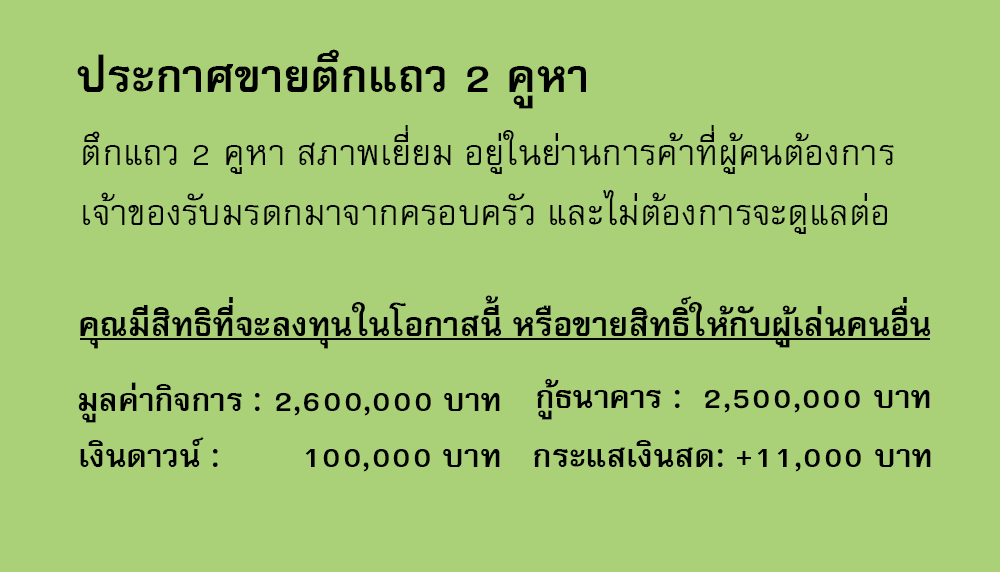
<style>
.page{position:relative;width:1000px;height:572px;background:#aad178}
.page>*{position:absolute;margin:0}
.t1{font:64px "FreesiaUPCBold";color:#000000}
.t2{font:50px/60px "FreesiaUPC";color:#000000}
.t3{font:47px "FreesiaUPCBold";color:#000000}
.t4{font:45px "FreesiaUPCBold";color:#000000}
</style>
<div class="page">
<p class="t1" style="left:77px;top:49px;width:509px;height:60px">ประกาศขายตึกแถว 2 คูหา</p>
<p class="t2" style="left:83px;top:125px;width:811px;height:109px">ตึกแถว 2 คูหา สภาพเยี่ยม อยู่ในย่านการค้าที่ผู้คนต้องการ<br>เจ้าของรับมรดกมาจากครอบครัว และไม่ต้องการจะดูแลต่อ</p>
<p class="t3" style="left:80px;top:295px;width:851px;height:54px">คุณมีสิทธิที่จะลงทุนในโอกาสนี้ หรือขายสิทธิ์ให้กับผู้เล่นคนอื่น</p>
<p class="t4" style="left:78px;top:382px;width:422px;height:41px">มูลค่ากิจการ : 2,600,000 บาท</p>
<p class="t4" style="left:537px;top:379px;width:393px;height:41px">กู้ธนาคาร :  2,500,000 บาท</p>
<p class="t4" style="left:80px;top:436px;width:420px;height:36px">เงินดาวน์ :        100,000 บาท</p>
<p class="t4" style="left:534px;top:440px;width:397px;height:32px">กระแสเงินสด: +11,000 บาท</p>
</div>
